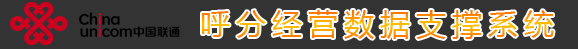
<style>
.page{position:relative;width:578px;height:49px;background:#333333}
.page>*{position:absolute;margin:0}
.t1{font:30px "MicrosoftYaHei";letter-spacing:0.2em}
</style>
<div class="page">
<p class="t1" style="left:202px;top:10px;width:352px;height:29px">呼分经营数据支撑系统</p>
</div>
